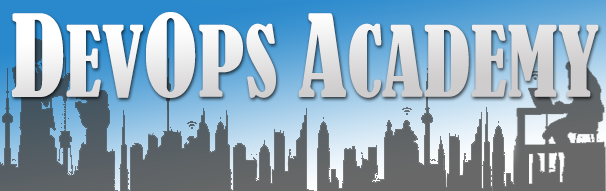
<style>
.page{position:relative;width:606px;height:191px}
.page>*{position:absolute;margin:0}
.t1{font:91.4px "BernardMT-Condensed";scale:0.95 1}
.t2{font:106.1px "BernardMT-Condensed";scale:0.95 1}
</style>
<div class="page">
<p class="t1" style="left:12px;top:12px;width:587px;height:86px"><span class="t2">D</span>EV<span class="t2">O</span>PS <span class="t2">A</span>CADEMY</p>
</div>
